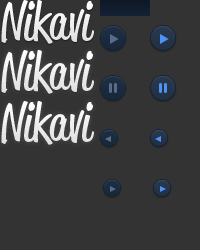
<style>
.page{position:relative;width:200px;height:250px;background:#333333}
.page>*{position:absolute;margin:0}
.t1{font:51px "ReklameScript-RegularDEMO";letter-spacing:-0.003em;color:#ffffff}
</style>
<div class="page">
<p class="t1" style="left:1px;top:0px;width:93px;height:44px">Nikavi</p>
<p class="t1" style="left:1px;top:50px;width:93px;height:44px">Nikavi</p>
<p class="t1" style="left:1px;top:101px;width:93px;height:44px">Nikavi</p>
</div>
